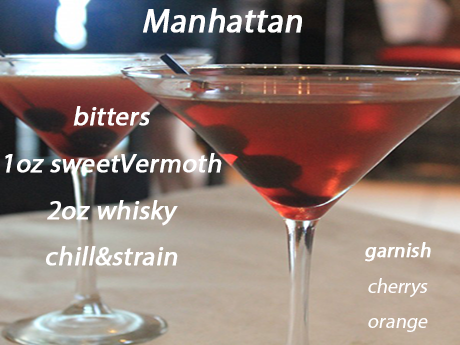
<style>
.page{position:relative;width:460px;height:345px}
.page>*{position:absolute;margin:0}
.t1{font:33.3px "MyriadPro-Regular";color:#ffffff;font-weight:bold;font-style:italic}
.t2{font:26.7px "MyriadPro-Regular";color:#ffffff;font-weight:bold;font-style:italic}
.t3{font:20px "MyriadPro-Regular";color:#ffffff;font-style:italic}
.t4{font:20px "MyriadPro-Regular";color:#ffffff;font-weight:bold;font-style:italic}
</style>
<div class="page">
<p class="t1" style="left:143px;top:8px;width:159px;height:25px">Manhattan</p>
<p class="t2" style="left:5px;top:106px;width:217px;height:160px;text-align:center">bitters<br>1oz sweetVermoth<br>2oz whisky<br>chill&amp;strain</p>
<p class="t3" style="left:365px;top:242px;width:66px;height:90px;text-align:center"><span class="t4">garnish<br></span>cherrys<br>orange</p>
</div>
